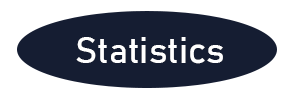
<style>
.page{position:relative;width:300px;height:100px;background:#ffffff}
.page>*{position:absolute;margin:0}
.t1{font:36px "Bahnschrift";color:#ffffff}
</style>
<div class="page">
<p class="t1" style="left:76px;top:37px;width:147px;height:27px">Statistics</p>
</div>
